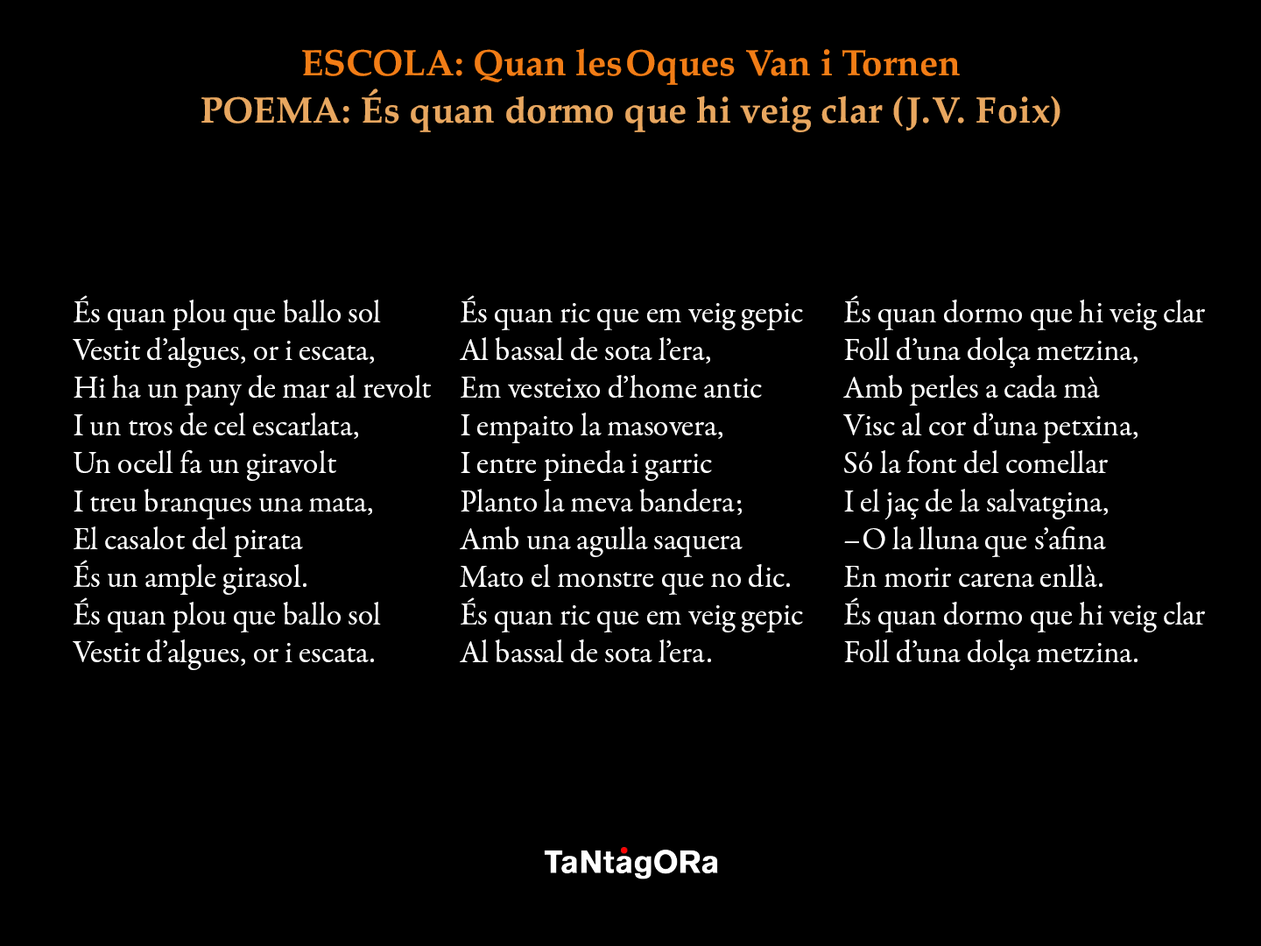
<style>
.page{position:relative;width:1261px;height:946px;background:#000000}
.page>*{position:absolute;margin:0}
.t1{font:36.8px "Palatino-Bold";color:#f27d16}
.t2{font:36.8px "Palatino-Bold";color:#e8a760}
.t3{font:36.8px "Palatino-Bold";letter-spacing:0.02em;color:#e8a760}
.t4{font:31.5px "GaramondPremrPro";color:#ffffff}
</style>
<div class="page">
<p class="t1" style="left:302px;top:48px;width:658px;height:37px">ESCOLA: Quan les Oques Van i Tornen</p>
<p class="t2" style="left:201px;top:88px;width:859px;height:44px">POEMA: És quan dormo que hi veig clar (<span class="t3">J.V. Foix</span>)</p>
<p class="t4" style="left:73px;top:295px;width:358px;height:375px">És quan plou que ballo sol<br>Vestit d’algues, or i escata,<br>Hi ha un pany de mar al revolt<br>I un tros de cel escarlata,<br>Un ocell fa un giravolt<br>I treu branques una mata,<br>El casalot del pirata<br>És un ample girasol.<br>És quan plou que ballo sol<br>Vestit d’algues, or i escata.</p>
<p class="t4" style="left:460px;top:295px;width:343px;height:367px">És quan ric que em veig gepic<br>Al bassal de sota l’era,<br>Em vesteixo d’home antic<br>I empaito la masovera,<br>I entre pineda i garric<br>Planto la meva bandera;<br>Amb una agulla saquera<br>Mato el monstre que no dic.<br>És quan ric que em veig gepic<br>Al bassal de sota l’era.</p>
<p class="t4" style="left:843px;top:295px;width:362px;height:375px">És quan dormo que hi veig clar<br>Foll d’una dolça metzina,<br>Amb perles a cada mà<br>Visc al cor d’una petxina,<br>Só la font del comellar<br>I el jaç de la salvatgina,<br>–O la lluna que s’afina<br>En morir carena enllà.<br>És quan dormo que hi veig clar<br>Foll d’una dolça metzina.</p>
</div>
